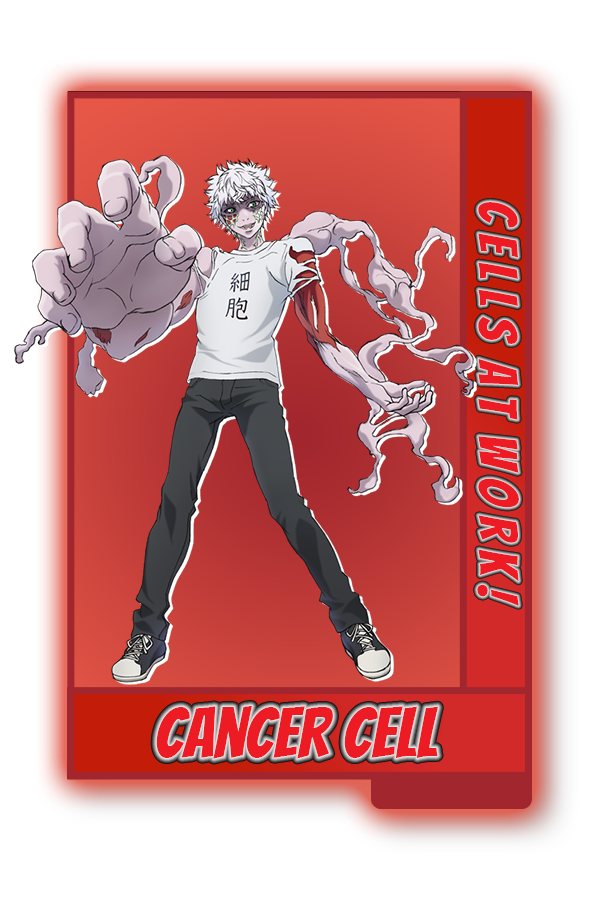
<style>
.page{position:relative;width:600px;height:900px;background:#ffffff}
.page>*{position:absolute;margin:0}
.t1{font:54px "Bangers-Regular";color:#ed1c24}
.t2{font:70px "Bangers-Regular";color:#ed1c24}
</style>
<div class="page">
<p class="t1" style="left:477px;top:202px;width:42px;height:404px;rotate:90deg">C e l l S  A t  W o r k !</p>
<p class="t2" style="left:156px;top:706px;width:282px;height:53px">Cancer Cell</p>
</div>
